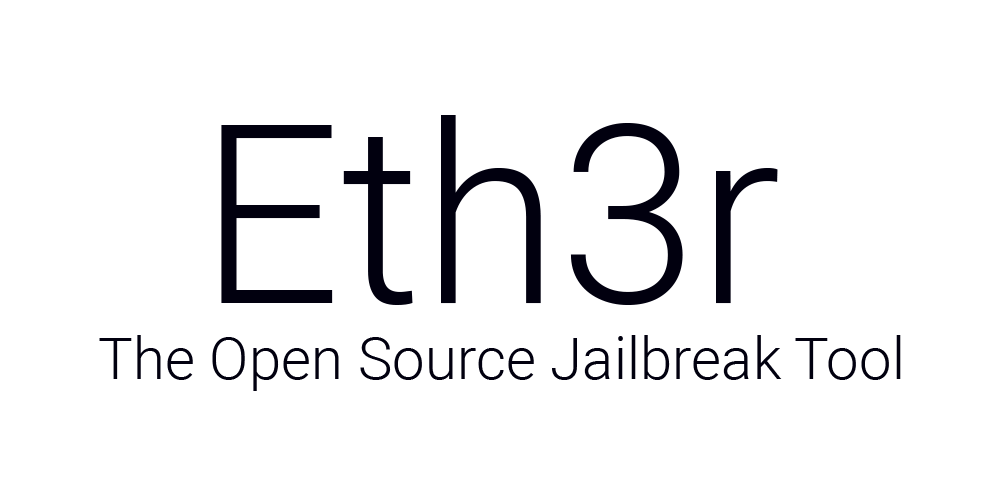
<style>
.page{position:relative;width:1000px;height:500px;background:#ffffff}
.page>*{position:absolute;margin:0}
.t1{font:250px "Roboto-Light";color:#01000f}
.t2{font:58.3px "Roboto-Light";color:#01000f}
</style>
<div class="page">
<p class="t1" style="left:221px;top:115px;width:557px;height:190px">Eth3r</p>
<p class="t2" style="left:99px;top:335px;width:802px;height:56px">The Open Source Jailbreak Tool</p>
</div>
